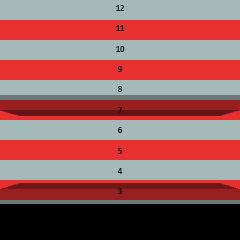
<style>
.page{position:relative;width:240px;height:240px;background:#a5b9b9}
.page>*{position:absolute;margin:0}
.t1{font:8.5px "Calibri-Bold";color:#191919}
</style>
<div class="page">
<p class="t1" style="left:116px;top:5px;width:9px;height:230px;text-align:center">12<br><br>11<br><br>10<br><br>9<br><br>8<br><br>7<br><br>6<br><br>5<br><br>4<br><br>3<br><br>2<br><br>1</p>
</div>
